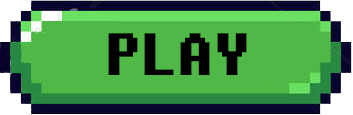
<style>
.page{position:relative;width:353px;height:115px;background:#50b847}
.page>*{position:absolute;margin:0}
.t1{font:58px "Fixedsys";color:#000000;font-weight:bold}
</style>
<div class="page">
<p class="t1" style="left:108px;top:33px;width:139px;height:42px">PLAY</p>
</div>
